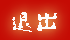
<style>
.page{position:relative;width:70px;height:40px}
.page>*{position:absolute;margin:0}
.t1{font:24px "-";color:#fefbfb}
</style>
<div class="page">
<p class="t1" style="left:12px;top:12px;width:45px;height:20px">退出</p>
</div>
